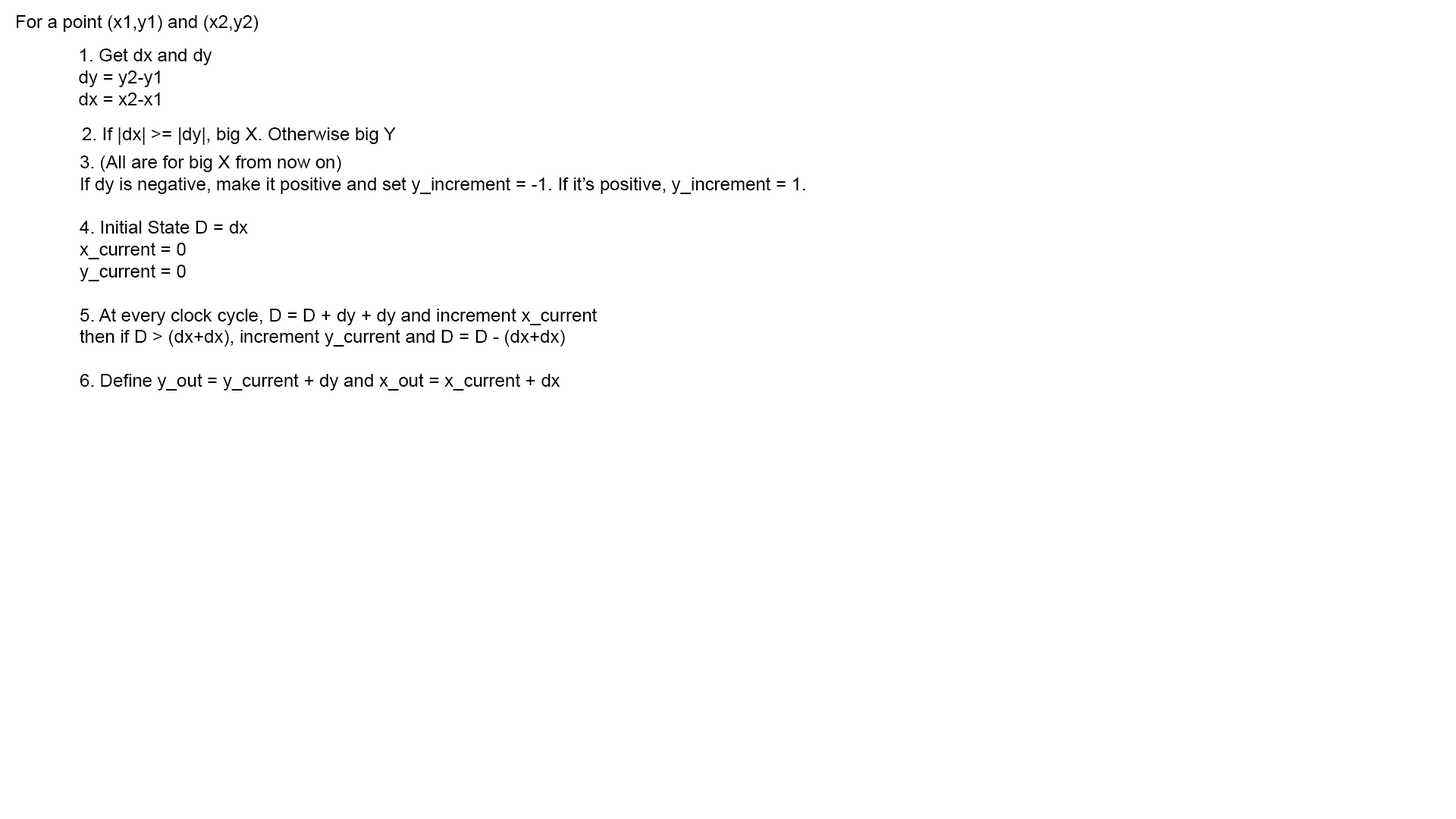
<style>
.page{position:relative;width:1456px;height:819px;background:#ffffff}
.page>*{position:absolute;margin:0}
.t1{font:18px "ArialMT";color:#000000}
.t2{font:18.2px "ArialMT";color:#000000}
</style>
<div class="page">
<p class="t1" style="left:17px;top:14px;width:242px;height:18px">For a point (x1,y1) and (x2,y2)</p>
<p class="t2" style="left:79px;top:48px;width:133px;height:57px">1. Get dx and dy<br>dy = y2-y1<br>dx = x2-x1</p>
<p class="t2" style="left:82px;top:127px;width:314px;height:18px">2. If |dx| &gt;= |dy|, big X. Otherwise big Y</p>
<p class="t2" style="left:80px;top:155px;width:725px;height:236px">3. (All are for big X from now on)<br>If dy is negative, make it positive and set y_increment = -1. If it’s positive, y_increment = 1.<br><br>4. Initial State D = dx<br>x_current = 0<br>y_current = 0<br><br>5. At every clock cycle, D = D + dy + dy and increment x_current<br>then if D &gt; (dx+dx), increment y_current and D = D - (dx+dx)<br><br>6. Define y_out = y_current + dy and x_out = x_current + dx</p>
</div>
